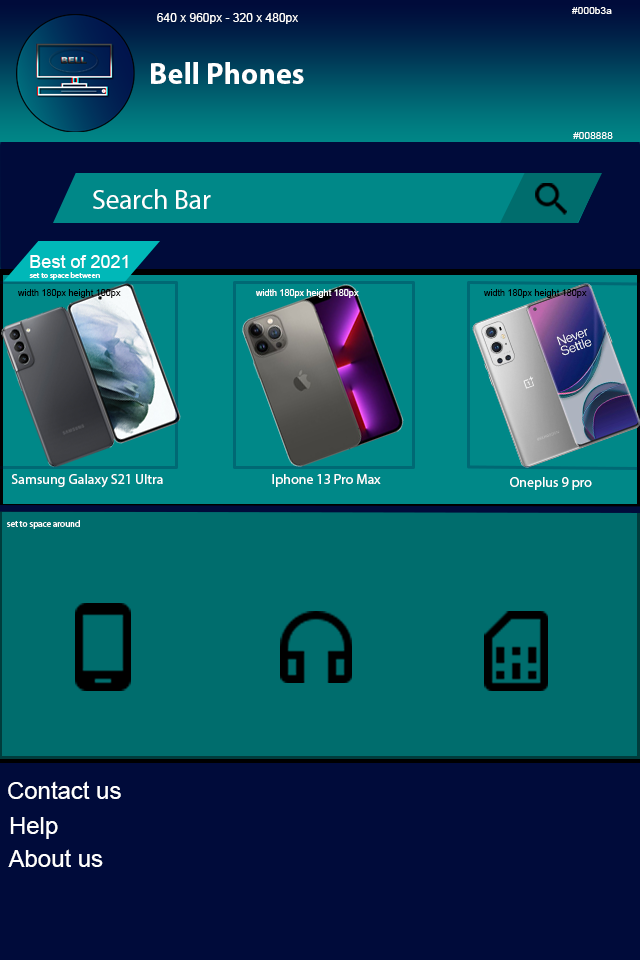
<style>
.page{position:relative;width:640px;height:960px;background:#000b3a}
.page>*{position:absolute;margin:0}
.t1{font:12px "ArialMT";color:#ffffff}
.t2{font:10.2px "ArialMT";color:#ffffff}
.t3{font:30px "MyriadPro-Bold";color:#ffffff}
.t4{font:27.3px "MyriadPro-Regular";color:#ffffff}
.t5{font:18px "ArialMT";color:#ffffff}
.t6{font:8px "MyriadPro-Regular";color:#ffffff}
.t7{font:9px "ArialMT";color:#000000}
.t8{font:10.2px "ArialMT";color:#000000}
.t9{font:9px "ArialMT";color:#ffffff}
.t10{font:14px "MyriadPro-Regular";color:#ffffff}
.t11{font:9px "MyriadPro-Regular";color:#ffffff}
.t12{font:23.9px "ArialMT";color:#ffffff}
</style>
<div class="page">
<p class="t1" style="left:157px;top:13px;width:141px;height:11px">640 x 960px - 320 x 480px</p>
<p class="t2" style="left:572px;top:7px;width:40px;height:7px">#000b3a</p>
<p class="t3" style="left:151px;top:62px;width:153px;height:22px">Bell Phones</p>
<p class="t2" style="left:573px;top:132px;width:40px;height:7px">#008888</p>
<p class="t4" style="left:93px;top:189px;width:118px;height:20px">Search Bar</p>
<p class="t5" style="left:30px;top:255px;width:98px;height:13px">Best of 2021</p>
<p class="t6" style="left:29px;top:272px;width:71px;height:8px">set to space between</p>
<p class="t7" style="left:18px;top:289px;width:103px;height:9px">width 180px height 100p<span class="t8">x</span></p>
<p class="t9" style="left:256px;top:289px;width:103px;height:9px">width 180px height 180p<span class="t2">x</span></p>
<p class="t7" style="left:484px;top:289px;width:103px;height:9px">width 180px height 180p<span class="t8">x</span></p>
<p class="t10" style="left:11px;top:474px;width:152px;height:14px">Samsung Galaxy S21 Ultra</p>
<p class="t10" style="left:272px;top:474px;width:109px;height:13px">Iphone 13 Pro Max</p>
<p class="t10" style="left:510px;top:477px;width:82px;height:13px">Oneplus 9 pro</p>
<p class="t11" style="left:7px;top:520px;width:73px;height:9px">set to space around</p>
<p class="t12" style="left:8px;top:781px;width:113px;height:18px">Contact us</p>
<p class="t12" style="left:10px;top:817px;width:48px;height:22px">Help</p>
<p class="t12" style="left:8px;top:849px;width:95px;height:18px">About us</p>
</div>
